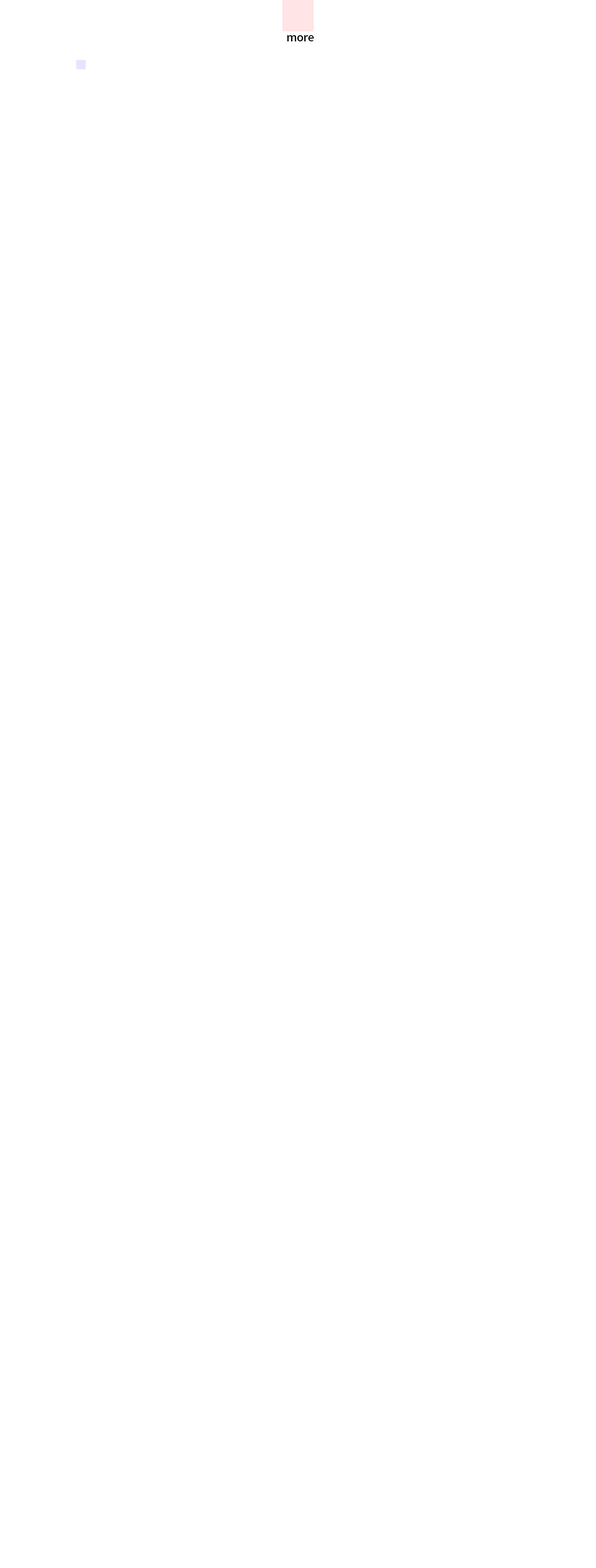
<style>
.page{position:relative;width:596px;height:1568px;background:#ffffff}
.page>*{position:absolute;margin:0}
.t1{font:11.3px "NotoSansKR-Medium";letter-spacing:-0.025em;color:#000000}
</style>
<div class="page">
<p class="t1" style="left:287px;top:35px;width:27px;height:6px">more</p>
</div>
